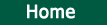
<style>
.page{position:relative;width:107px;height:25px;background:#005941}
.page>*{position:absolute;margin:0}
.t1{font:18px "Tahoma";letter-spacing:0.02em;color:#ffffff;font-weight:bold}
</style>
<div class="page">
<p class="t1" style="left:27px;top:4px;width:48px;height:15px">Home</p>
</div>
